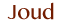
<style>
.page{position:relative;width:63px;height:25px;background:#ffffff}
.page>*{position:absolute;margin:0}
.t1{font:18px "BanglaMN";color:#731c00}
</style>
<div class="page">
<p class="t1" style="left:7px;top:2px;width:47px;height:18px">Joud</p>
</div>
